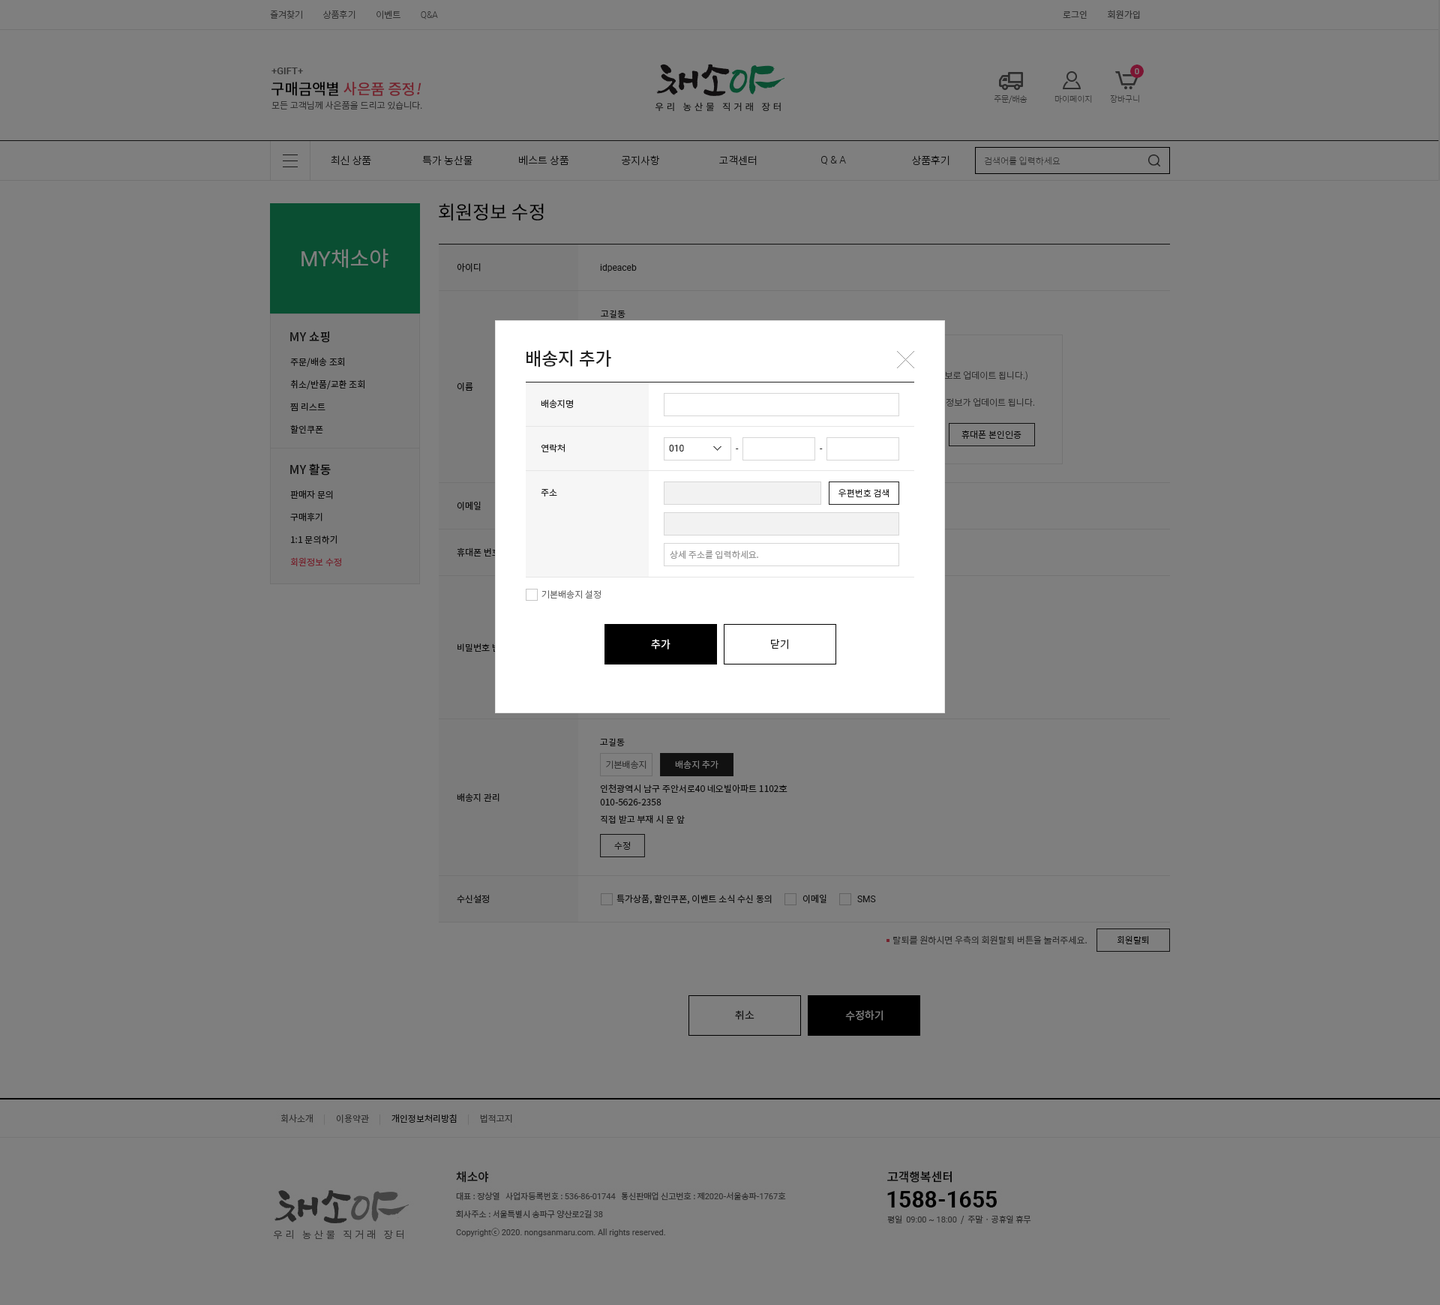
<style>
.page{position:relative;width:1440px;height:1305px;background:#7f7f7f}
.page>*{position:absolute;margin:0}
.t1{font:9px "NotoSansCJKkr-Light";color:#333333}
.t2{font:9px "Roboto-Light";color:#333333}
.t3{font:9px "NotoSansCJKkr-DemiLight";color:#333333}
.t4{font:9.8px "Roboto-Medium";color:#333333}
.t5{font:15px "NotoSansCJKkr-Medium"}
.t6{font:15px "NotoSansCJKkr-Medium";font-style:italic}
.t7{font:8.2px "NotoSansCJKkr-Thin";color:#333333}
.t8{font:10.5px "NotoSansCJKkr-Light";color:#222222}
.t9{font:10.5px "Roboto-Light";color:#222222}
.t10{font:9px "NotoSansCJKkr-Thin";color:#333333}
.t11{font:18.8px "NotoSansCJKkr-Regular";color:#000000}
.t12{font:21px "NotoSansCJKkr-Regular";color:#7f7f7f}
.t13{font:21px "Roboto-Regular";color:#7f7f7f}
.t14{font:9px "NotoSansCJKkr-Regular";color:#222222}
.t15{font:9px "Roboto-Regular";color:#222222}
.t16{font:12px "NotoSansCJKkr-Medium";color:#222222}
.t17{font:18px "NotoSansCJKkr-Medium";color:#222222}
.t18{font:9px/22.5px "NotoSansCJKkr-Regular";color:#222222}
.t19{font:9px "NotoSansCJKkr-Light";color:#222222}
.t20{font:9px/22.5px "NotoSansCJKkr-Regular";color:#ea475c}
.t21{font:9px "NotoSansCJKkr-Regular";color:#999999}
.t22{font:9px "NotoSansCJKkr-Light";color:#666666}
.t23{font:10.5px "NotoSansCJKkr-DemiLight";color:#ffffff}
.t24{font:10.5px "NotoSansCJKkr-DemiLight";color:#222222}
.t25{font:9px "NotoSansCJKkr-Light";color:#7f7f7f}
.t26{font:9px/13.5px "NotoSansCJKkr-Regular";color:#222222}
.t27{font:9px "NotoSansCJKkr-Regular";color:#333333}
.t28{font:10.5px "NotoSansCJKkr-DemiLight";color:#7f7f7f}
</style>
<div class="page">
<p class="t1" style="left:270px;top:10px;width:168px;height:10px">즐겨찾기          상품후기          이벤트          <span class="t2">Q&amp;A</span></p>
<p class="t3" style="left:1063px;top:10px;width:77px;height:10px">로그인          회원가입</p>
<p class="t4" style="left:272px;top:68px;width:31px;height:6px">+GIFT+</p>
<p class="t5" style="left:272px;top:82px;width:150px;height:14px">구매금액별 사은품 증정<span class="t6">!</span></p>
<p class="t1" style="left:272px;top:100px;width:150px;height:10px">모든 고객님께 사은품을 드리고 있습니다.</p>
<p class="t7" style="left:994px;top:94px;width:34px;height:10px">주문/배송</p>
<p class="t7" style="left:1054px;top:95px;width:38px;height:9px">마이페이지</p>
<p class="t7" style="left:1110px;top:94px;width:29px;height:10px">장바구니</p>
<p class="t8" style="left:331px;top:155px;width:40px;height:10px">최신 상품</p>
<p class="t8" style="left:422px;top:155px;width:50px;height:11px">특가 농산물</p>
<p class="t8" style="left:519px;top:155px;width:50px;height:11px">베스트 상품</p>
<p class="t8" style="left:622px;top:155px;width:38px;height:11px">공지사항</p>
<p class="t8" style="left:719px;top:155px;width:38px;height:11px">고객센터</p>
<p class="t9" style="left:821px;top:156px;width:25px;height:9px">Q &amp; A</p>
<p class="t8" style="left:912px;top:155px;width:38px;height:11px">상품후기</p>
<p class="t10" style="left:984px;top:156px;width:76px;height:10px">검색어를 입력하세요</p>
<p class="t11" style="left:439px;top:203px;width:105px;height:18px">회원정보 수정</p>
<p class="t12" style="left:302px;top:248px;width:86px;height:20px"><span class="t13">MY</span>채소야</p>
<p class="t14" style="left:457px;top:263px;width:24px;height:9px">아이디</p>
<p class="t15" style="left:600px;top:264px;width:37px;height:8px">idpeaceb</p>
<p class="t14" style="left:601px;top:310px;width:25px;height:8px">고길동</p>
<p class="t16" style="left:290px;top:331px;width:39px;height:12px">MY 쇼핑</p>
<p class="t17" style="left:526px;top:350px;width:85px;height:18px">배송지 추가</p>
<p class="t18" style="left:290px;top:357px;width:74px;height:77px">주문/배송 조회<br>취소/반품/교환 조회<br>찜 리스트<br>할인쿠폰</p>
<p class="t14" style="left:457px;top:382px;width:16px;height:10px">이름</p>
<p class="t14" style="left:541px;top:399px;width:32px;height:9px">배송지명</p>
<p class="t19" style="left:962px;top:430px;width:60px;height:10px">휴대폰 본인인증</p>
<p class="t14" style="left:541px;top:444px;width:24px;height:8px">연락처</p>
<p class="t15" style="left:669px;top:445px;width:15px;height:7px">010</p>
<p class="t15" style="left:736px;top:448px;width:3px;height:1px">-</p>
<p class="t15" style="left:820px;top:448px;width:3px;height:1px">-</p>
<p class="t16" style="left:290px;top:464px;width:41px;height:12px">MY 활동</p>
<p class="t18" style="left:290px;top:490px;width:51px;height:76px">판매자 문의<br>구매후기<br>1:1 문의하기<br><span class="t20">회원정보 수정</span></p>
<p class="t14" style="left:541px;top:489px;width:16px;height:7px">주소</p>
<p class="t19" style="left:838px;top:489px;width:52px;height:8px">우편번호 검색</p>
<p class="t14" style="left:457px;top:501px;width:24px;height:10px">이메일</p>
<p class="t14" style="left:457px;top:548px;width:43px;height:9px">휴대폰 번호</p>
<p class="t21" style="left:670px;top:550px;width:88px;height:10px">상세 주소를 입력하세요.</p>
<p class="t22" style="left:542px;top:590px;width:59px;height:8px">기본배송지 설정</p>
<p class="t23" style="left:651px;top:639px;width:19px;height:11px">추가</p>
<p class="t24" style="left:771px;top:639px;width:17px;height:11px">닫기</p>
<p class="t14" style="left:600px;top:738px;width:25px;height:8px">고길동</p>
<p class="t1" style="left:606px;top:760px;width:40px;height:9px">기본배송지</p>
<p class="t25" style="left:675px;top:760px;width:43px;height:9px">배송지 추가</p>
<p class="t26" style="left:600px;top:784px;width:188px;height:22px">인천광역시 남구 주안서로40 네오빌아파트 1102호<br>010-5626-2358</p>
<p class="t14" style="left:457px;top:793px;width:43px;height:9px">배송지 관리</p>
<p class="t14" style="left:601px;top:814px;width:84px;height:10px">직접 받고 부재 시 문 앞</p>
<p class="t19" style="left:614px;top:842px;width:16px;height:8px">수정</p>
<p class="t14" style="left:616px;top:894px;width:156px;height:10px">특가상품, 할인쿠폰, 이벤트 소식 수신 동의</p>
<p class="t14" style="left:802px;top:894px;width:24px;height:10px">이메일</p>
<p class="t14" style="left:457px;top:895px;width:32px;height:8px">수신설정</p>
<p class="t15" style="left:857px;top:896px;width:19px;height:6px">SMS</p>
<p class="t27" style="left:893px;top:935px;width:194px;height:10px">탈퇴를 원하시면 우측의 회원탈퇴 버튼을 눌러주세요.</p>
<p class="t19" style="left:1118px;top:935px;width:31px;height:9px">회원탈퇴</p>
<p class="t24" style="left:735px;top:1010px;width:19px;height:10px">취소</p>
<p class="t28" style="left:845px;top:1010px;width:38px;height:11px">수정하기</p>
</div>
